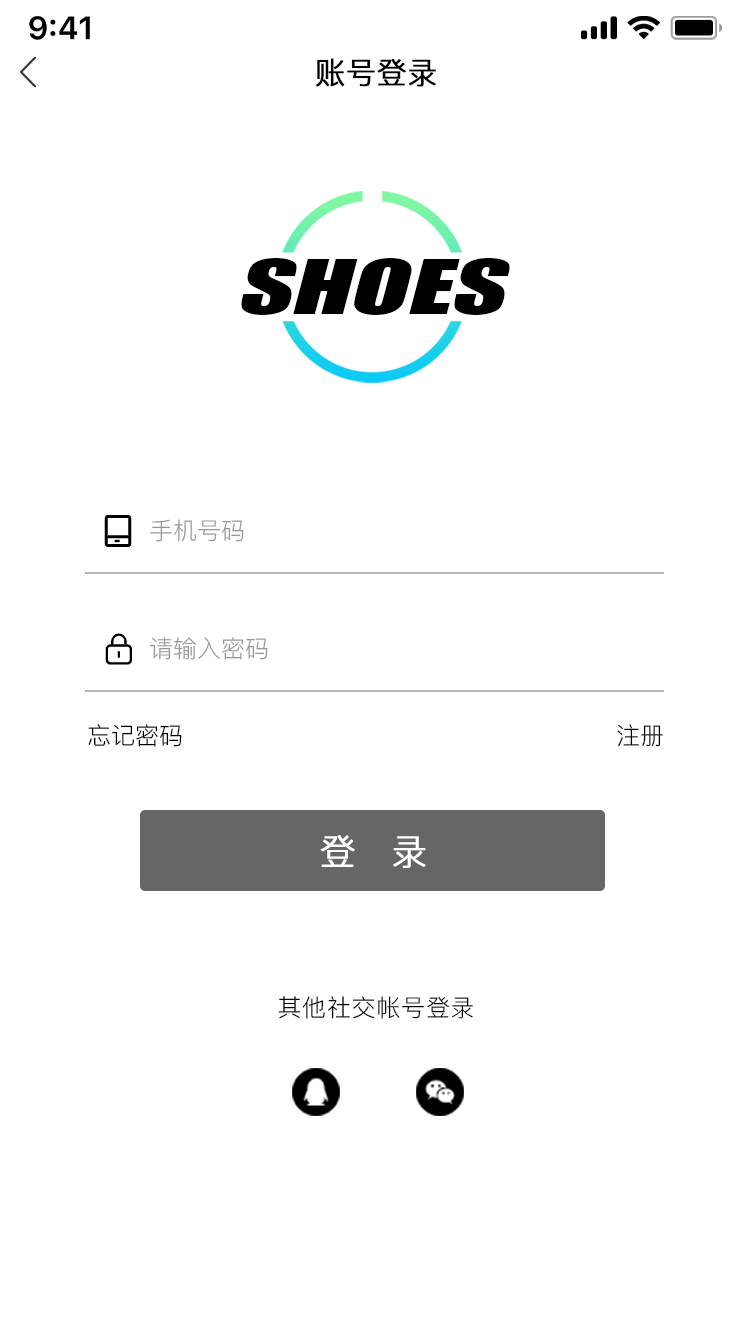
<style>
.page{position:relative;width:750px;height:1334px;background:#ffffff}
.page>*{position:absolute;margin:0}
.t1{font:30px "PingFang-SC-Regular";color:#000000;font-weight:bold}
.t2{font:70.3px "Impact";color:#000000;font-style:italic;scale:1.49 1}
.t3{font:24px "PingFang-SC-Regular";color:#999999}
.t4{font:24px "PingFang-SC-Regular";color:#000000}
.t5{font:36px "PingFang-SC-Regular";letter-spacing:1em;color:#ffffff;font-weight:bold}
.t6{font:24px "PingFang-SC-Regular";letter-spacing:0.03em;color:#000000}
</style>
<div class="page">
<p class="t1" style="left:316px;top:58px;width:120px;height:29px">账号登录</p>
<p class="t2" style="left:241px;top:258px;width:269px;height:57px">SHOES</p>
<p class="t3" style="left:150px;top:519px;width:94px;height:23px">手机号码</p>
<p class="t3" style="left:149px;top:637px;width:119px;height:23px">请输入密码</p>
<p class="t4" style="left:88px;top:724px;width:94px;height:23px">忘记密码</p>
<p class="t4" style="left:617px;top:724px;width:46px;height:23px">注册</p>
<p class="t5" style="left:320px;top:835px;width:106px;height:33px">登录</p>
<p class="t6" style="left:278px;top:996px;width:195px;height:23px">其他社交帐号登录</p>
</div>
